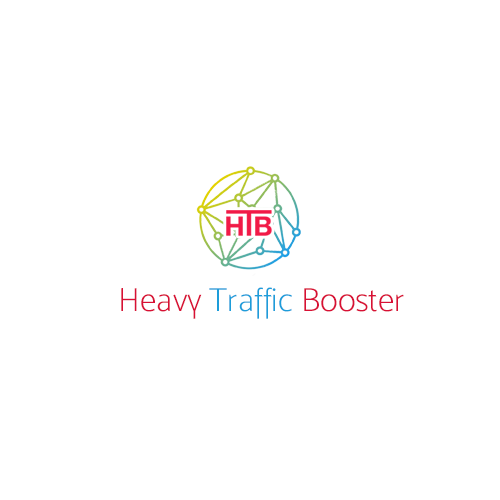
<style>
.page{position:relative;width:500px;height:500px;background:#ffffff}
.page>*{position:absolute;margin:0}
.t1{font:33.6px "MoskExtra-Light200";color:#1d9dda}
.t2{font:33.6px "MoskExtra-Light200";color:#d81035}
</style>
<div class="page">
<p class="t1" style="left:121px;top:287px;width:283px;height:32px"><span class="t2">Heavy </span>Traffic<span class="t2"> Booster</span></p>
</div>
